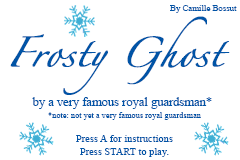
<style>
.page{position:relative;width:240px;height:160px;background:#ffffff}
.page>*{position:absolute;margin:0}
.t1{font:8.3px "TimesNewRomanPSMT";color:#0054a6;scale:1.05 1}
.t2{font:27.1px "Zapfino";color:#0054a6;font-weight:bold}
.t3{font:12.5px "TimesNewRomanPSMT";color:#0054a6}
.t4{font:8.3px "TimesNewRomanPSMT";color:#0054a6}
.t5{font:10.4px "TimesNewRomanPSMT";color:#0054a6}
</style>
<div class="page">
<p class="t1" style="left:170px;top:5px;width:67px;height:8px">By Camille Bossut</p>
<p class="t2" style="left:10px;top:16px;width:220px;height:79px;text-align:center">Frosty Ghost</p>
<p class="t3" style="left:32px;top:97px;width:180px;height:12px">by a very famous royal guardsman*</p>
<p class="t4" style="left:48px;top:112px;width:153px;height:8px">*note: not yet a very famous royal guardsman</p>
<p class="t5" style="left:76px;top:135px;width:97px;height:22px;text-align:center">Press A for instructions<br>Press START to play.</p>
</div>
